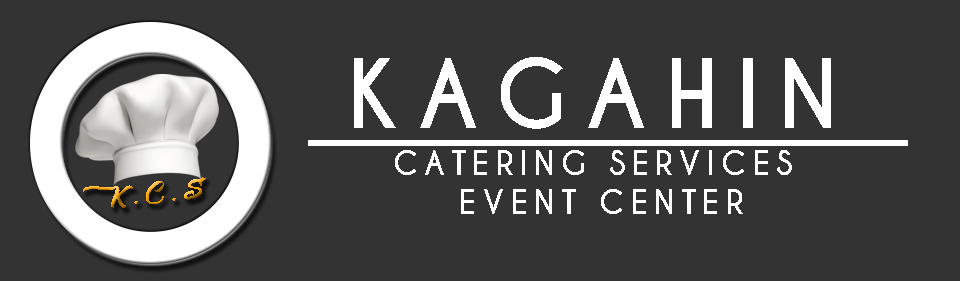
<style>
.page{position:relative;width:960px;height:281px;background:#333333}
.page>*{position:absolute;margin:0}
.t1{font:90px "CaviarDreams-Bold";letter-spacing:0.2em;color:#ffffff}
.t2{font:32.4px "CaviarDreams-Bold";letter-spacing:0.2em;color:#ffffff;scale:0.95 1}
.t3{font:42.6px "Albondigas";letter-spacing:0.2em}
</style>
<div class="page">
<p class="t1" style="left:354px;top:57px;width:477px;height:72px">KAGAHIN</p>
<p class="t2" style="left:395px;top:150px;width:397px;height:64px;text-align:center">CATERING SERVICES <br>EVENT CENTER</p>
<p class="t3" style="left:83px;top:177px;width:123px;height:31px;rotate:-4deg">K.C.S</p>
</div>
